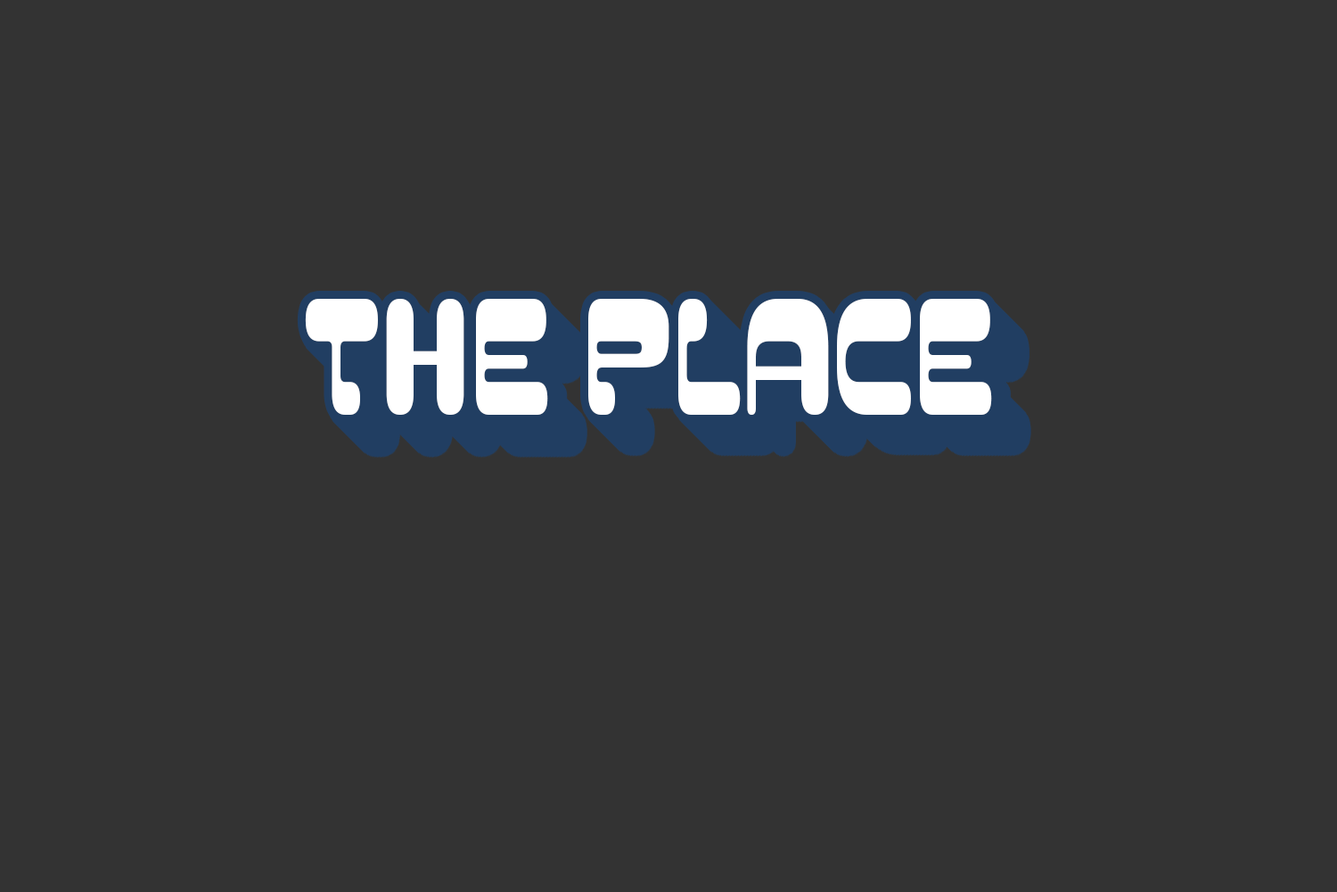
<style>
.page{position:relative;width:1337px;height:892px;background:#333333}
.page>*{position:absolute;margin:0}
.t1{font:192.9px "CaplesDemo-Regular";color:#ffffff;scale:0.64 1}
</style>
<div class="page">
<p class="t1" style="left:305px;top:299px;width:687px;height:116px">THE PLACE</p>
</div>
